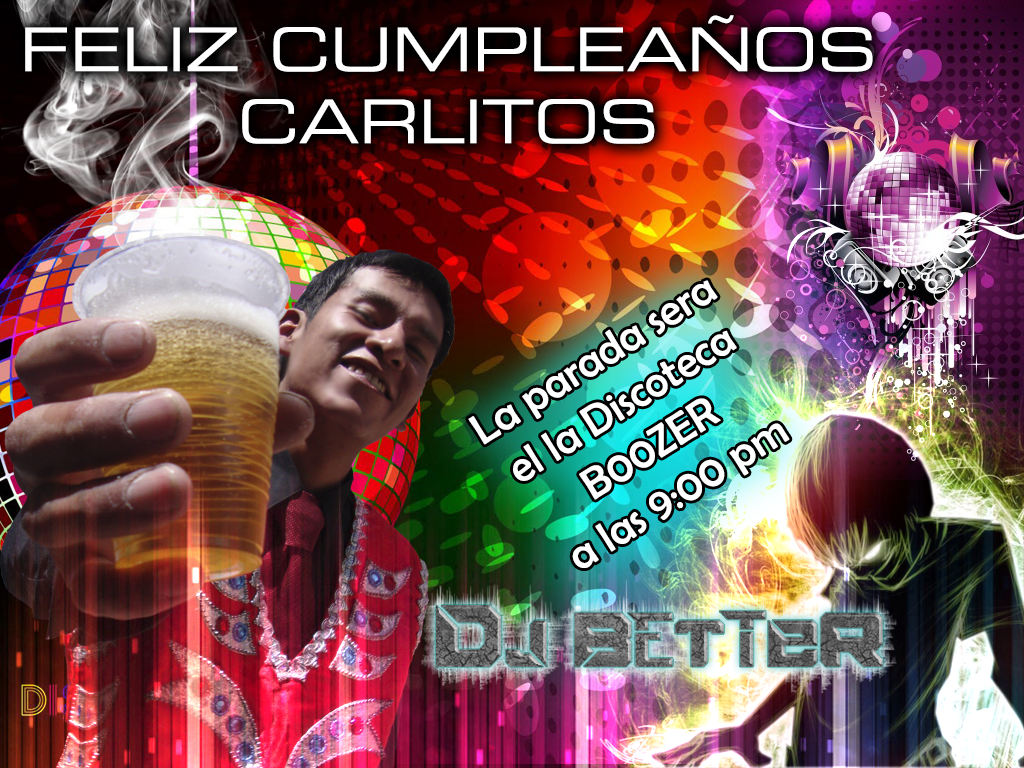
<style>
.page{position:relative;width:1024px;height:768px}
.page>*{position:absolute;margin:0}
.t1{font:60px "Eurostile-ExtendedTwo";color:#ffffff}
.t2{font:44px "BerlinSansFB-Reg";color:#ffffff}
</style>
<div class="page">
<p class="t1" style="left:25px;top:15px;width:848px;height:129px;text-align:center">FELIZ CUMPLEAÑOS<br>CARLITOS</p>
<p class="t2" style="left:468px;top:280px;width:322px;height:288px;text-align:center;rotate:-32deg">La parada sera<br>el la Discoteca<br>B00ZER<br>a las 9:00 pm</p>
</div>
